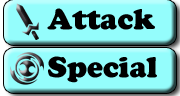
<style>
.page{position:relative;width:180px;height:96px;background:#94fdfc}
.page>*{position:absolute;margin:0}
.t1{font:30px "CooperBlack";color:#000000}
</style>
<div class="page">
<p class="t1" style="left:47px;top:8px;width:108px;height:22px">Attack</p>
<p class="t1" style="left:48px;top:56px;width:109px;height:27px">Special</p>
</div>
